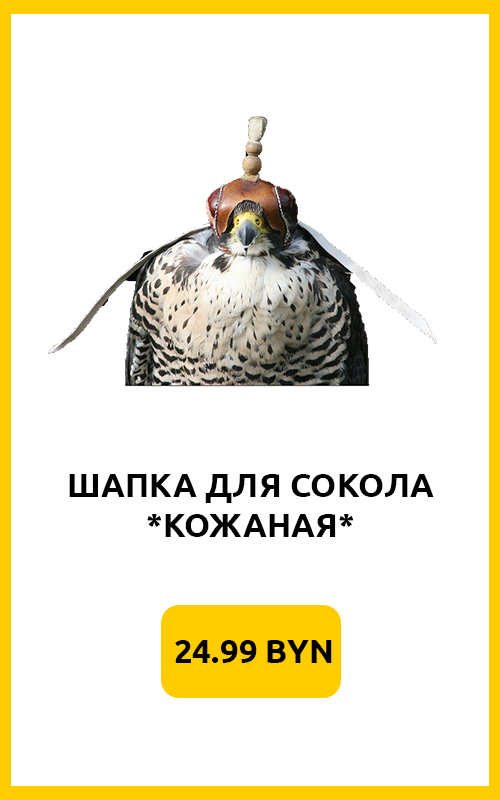
<style>
.page{position:relative;width:500px;height:800px;background:#ffffff}
.page>*{position:absolute;margin:0}
.t1{font:33.3px "Ubuntu-Bold";color:#000000}
</style>
<div class="page">
<p class="t1" style="left:69px;top:474px;width:365px;height:63px;text-align:center">ШАПКА ДЛЯ СОКОЛА<br>*КОЖАНАЯ*</p>
<p class="t1" style="left:175px;top:640px;width:157px;height:23px">24.99 BYN</p>
</div>
